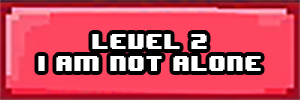
<style>
.page{position:relative;width:300px;height:100px;background:#fe4661}
.page>*{position:absolute;margin:0}
.t1{font:18px "8BITWONDERNominal";color:#ffffff}
</style>
<div class="page">
<p class="t1" style="left:38px;top:34px;width:223px;height:37px;text-align:center">Level 2<br>I am not alone</p>
</div>
